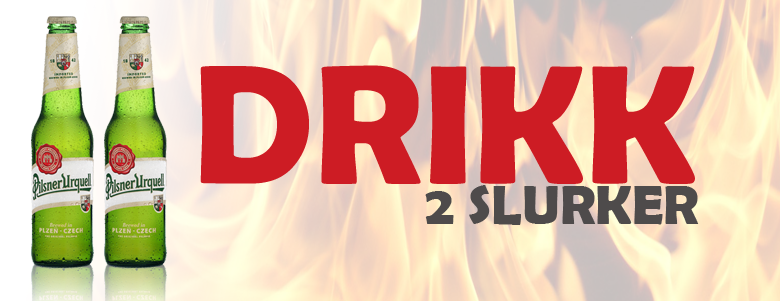
<style>
.page{position:relative;width:780px;height:301px}
.page>*{position:absolute;margin:0}
.t1{font:169.7px "BerlinSansFBDemi-Bold";color:#cd1c24}
.t2{font:55.7px "BerlinSansFBDemi-Bold";color:#4e4b4b}
</style>
<div class="page">
<p class="t1" style="left:200px;top:65px;width:495px;height:119px">DRIKK</p>
<p class="t2" style="left:425px;top:185px;width:274px;height:40px">2 SLURKER</p>
</div>
